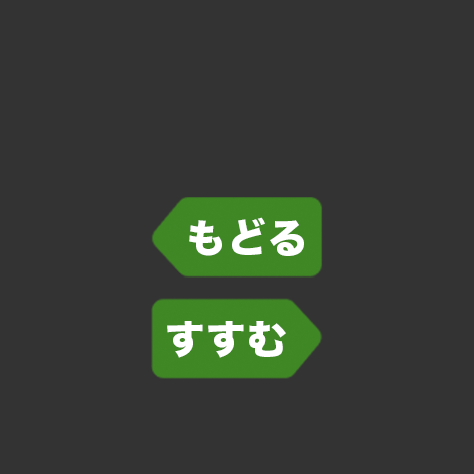
<style>
.page{position:relative;width:474px;height:474px;background:#333333}
.page>*{position:absolute;margin:0}
.t1{font:40px "HiraKakuStd-W8";letter-spacing:0.02em;color:#ffffff}
</style>
<div class="page">
<p class="t1" style="left:189px;top:217px;width:115px;height:39px">もどる</p>
<p class="t1" style="left:167px;top:321px;width:119px;height:37px">すすむ</p>
</div>
